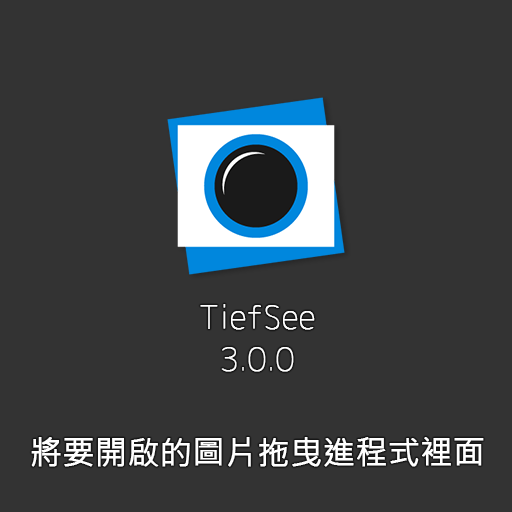
<style>
.page{position:relative;width:512px;height:512px;background:#333333}
.page>*{position:absolute;margin:0}
.t1{font:31.7px "Chogokuboso-Gothic";color:#ffffff;font-weight:bold}
.t2{font:31.7px "MicrosoftJhengHeiRegular";color:#ffffff;font-weight:bold}
</style>
<div class="page">
<p class="t1" style="left:200px;top:304px;width:115px;height:26px">TiefSee</p>
<p class="t1" style="left:221px;top:347px;width:73px;height:25px">3.0.0</p>
<p class="t2" style="left:31px;top:437px;width:453px;height:30px">將要開啟的圖片拖曳進程式裡面</p>
</div>
